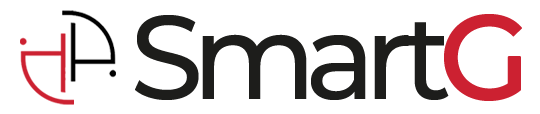
<style>
.page{position:relative;width:540px;height:114px;background:#ffffff}
.page>*{position:absolute;margin:0}
.t1{font:118px "Montserrat-Medium";letter-spacing:-0.1em;color:#1d1d1b}
.t2{font:118px "Montserrat-Medium";letter-spacing:-0.1em;color:#cc2131;font-weight:bold}
</style>
<div class="page">
<p class="t1" style="left:135px;top:14px;width:387px;height:87px">Smart<span class="t2">G</span></p>
</div>
